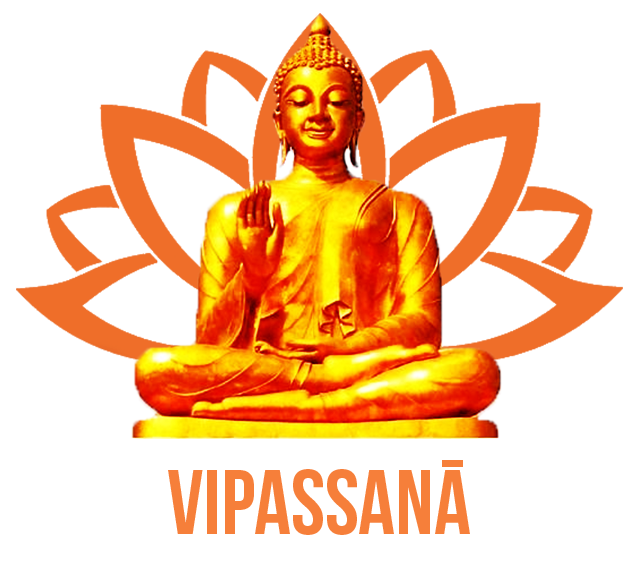
<style>
.page{position:relative;width:629px;height:563px;background:#ffffff}
.page>*{position:absolute;margin:0}
.t1{font:90.8px "BebasNeue";color:#f67f3a}
</style>
<div class="page">
<p class="t1" style="left:168px;top:460px;width:302px;height:75px">Vipassanā</p>
</div>
